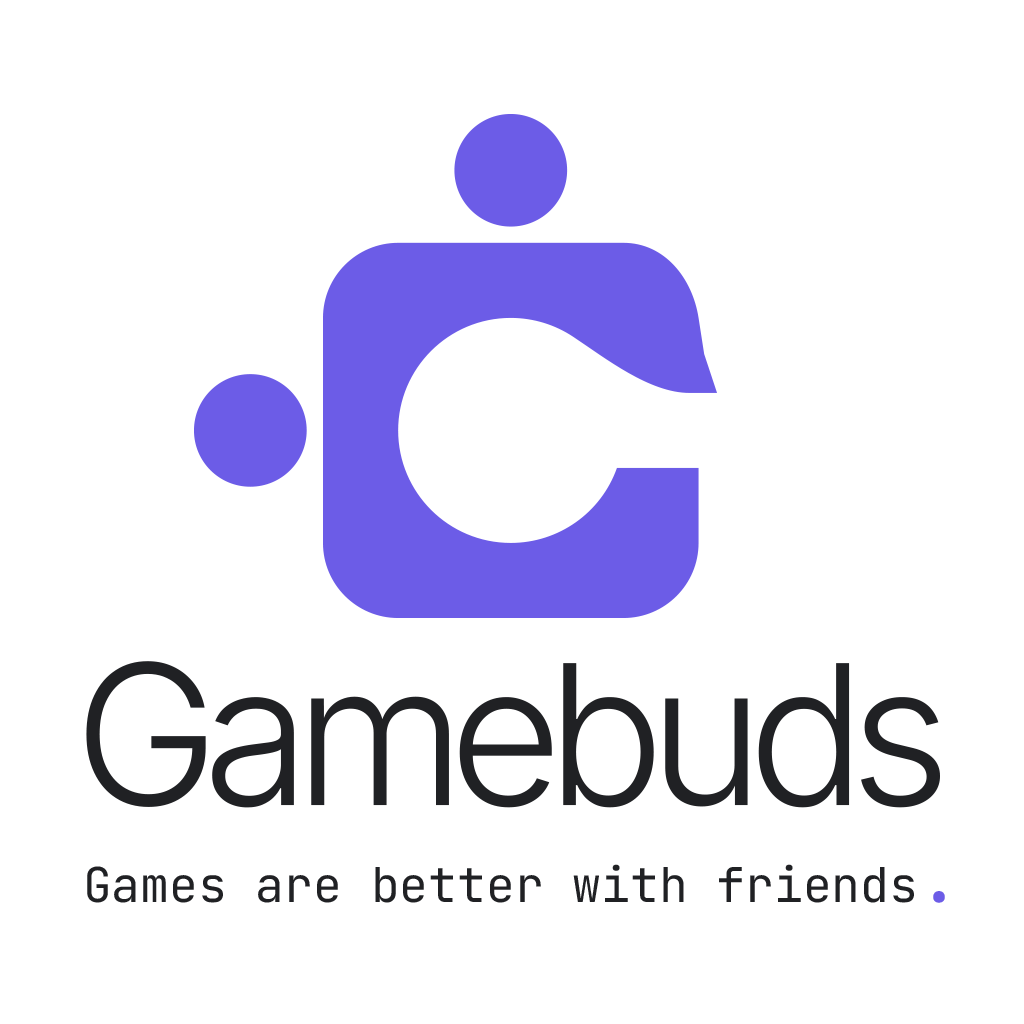
<style>
.page{position:relative;width:1024px;height:1024px;background:#ffffff}
.page>*{position:absolute;margin:0}
.t1{font:195px "Inter-Light";letter-spacing:-0.08em;color:#202124}
.t2{font:48px "JetBrainsMono-Regular";color:#202124}
.t3{font:70px "JetBrainsMono-Regular";color:#6c5ce7}
</style>
<div class="page">
<p class="t1" style="left:86px;top:661px;width:854px;height:147px">Gamebuds</p>
<p class="t2" style="left:87px;top:864px;width:858px;height:39px">Games are better with friends<span class="t3">.</span></p>
</div>
